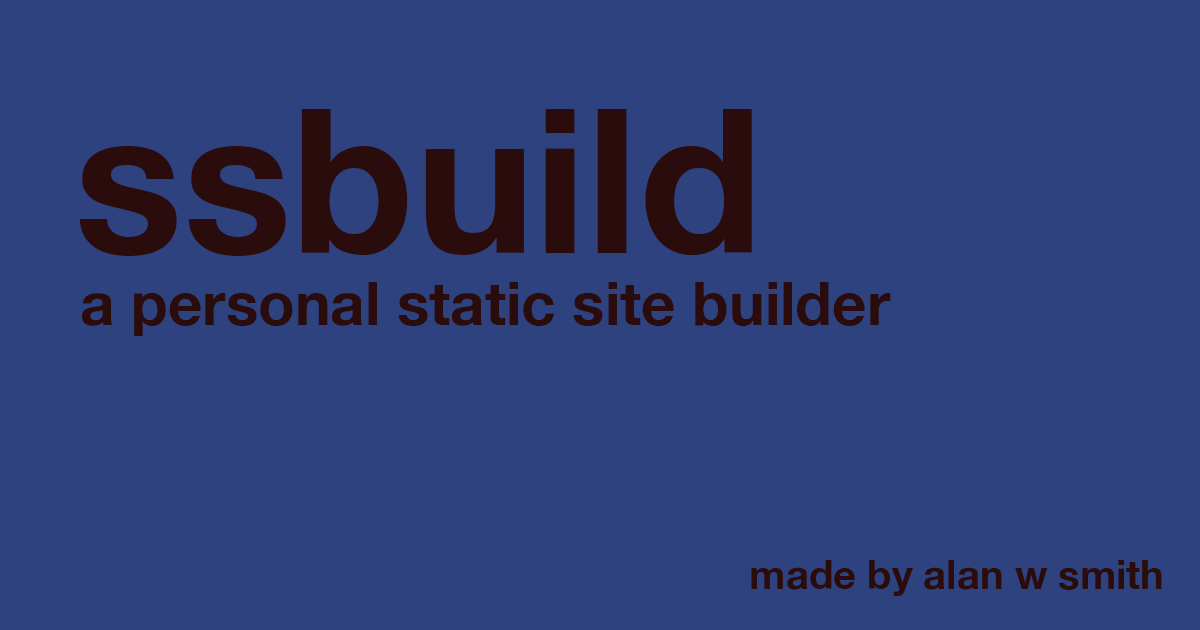
<style>
.page{position:relative;width:1200px;height:630px;background:#2f4280}
.page>*{position:absolute;margin:0}
.t1{font:202px "HelveticaNeue-Bold";color:#2b0c0c}
.t2{font:60px "HelveticaNeue-Bold";color:#2b0c0c}
.t3{font:40px "HelveticaNeue-Bold";color:#2b0c0c}
</style>
<div class="page">
<p class="t1" style="left:79px;top:109px;width:673px;height:147px">ssbuild</p>
<p class="t2" style="left:82px;top:282px;width:809px;height:54px">a personal static site builder</p>
<p class="t3" style="left:751px;top:560px;width:411px;height:36px">made by alan w smith</p>
</div>
